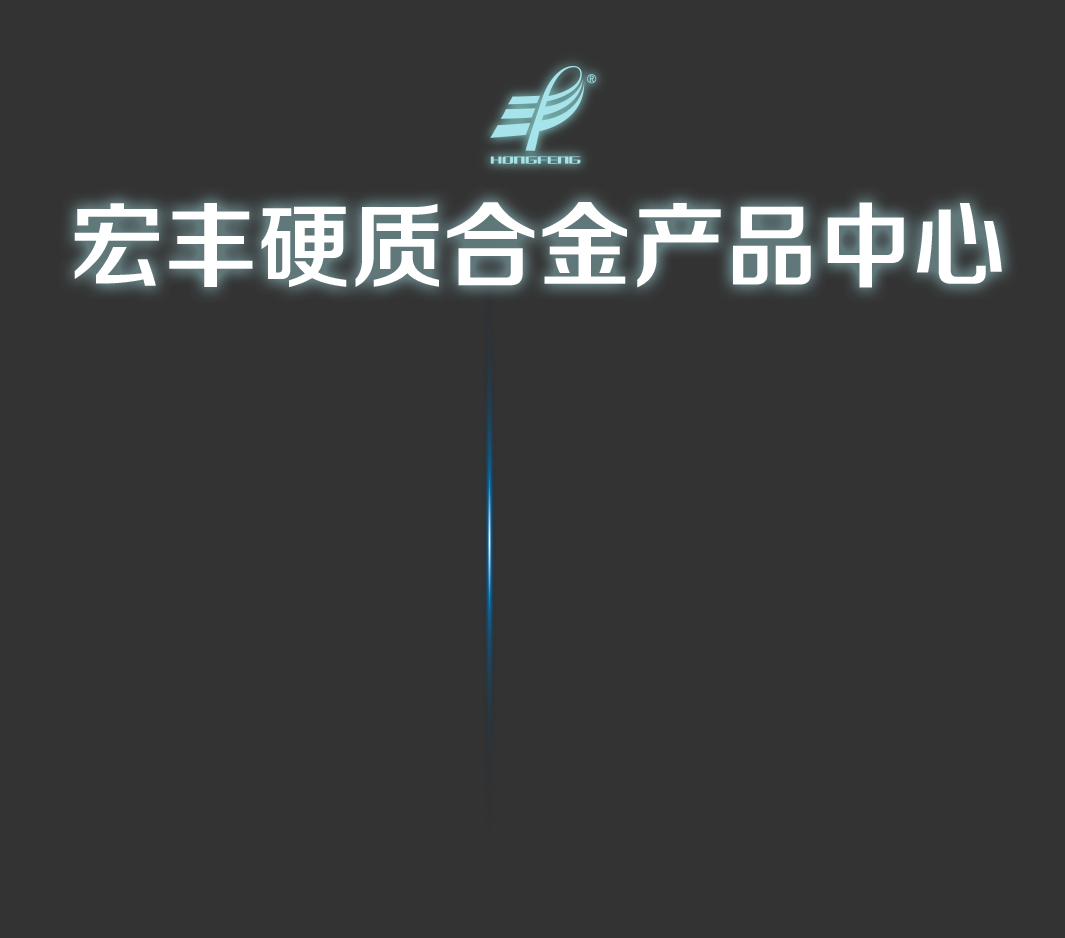
<style>
.page{position:relative;width:1065px;height:938px;background:#333333}
.page>*{position:absolute;margin:0}
.t1{font:93.6px "FZZZHONGJW--GB1-0";color:#ffffff;text-transform:uppercase}
</style>
<div class="page">
<p class="t1" style="left:74px;top:202px;width:928px;height:86px">宏丰硬质合金产品中心</p>
</div>
